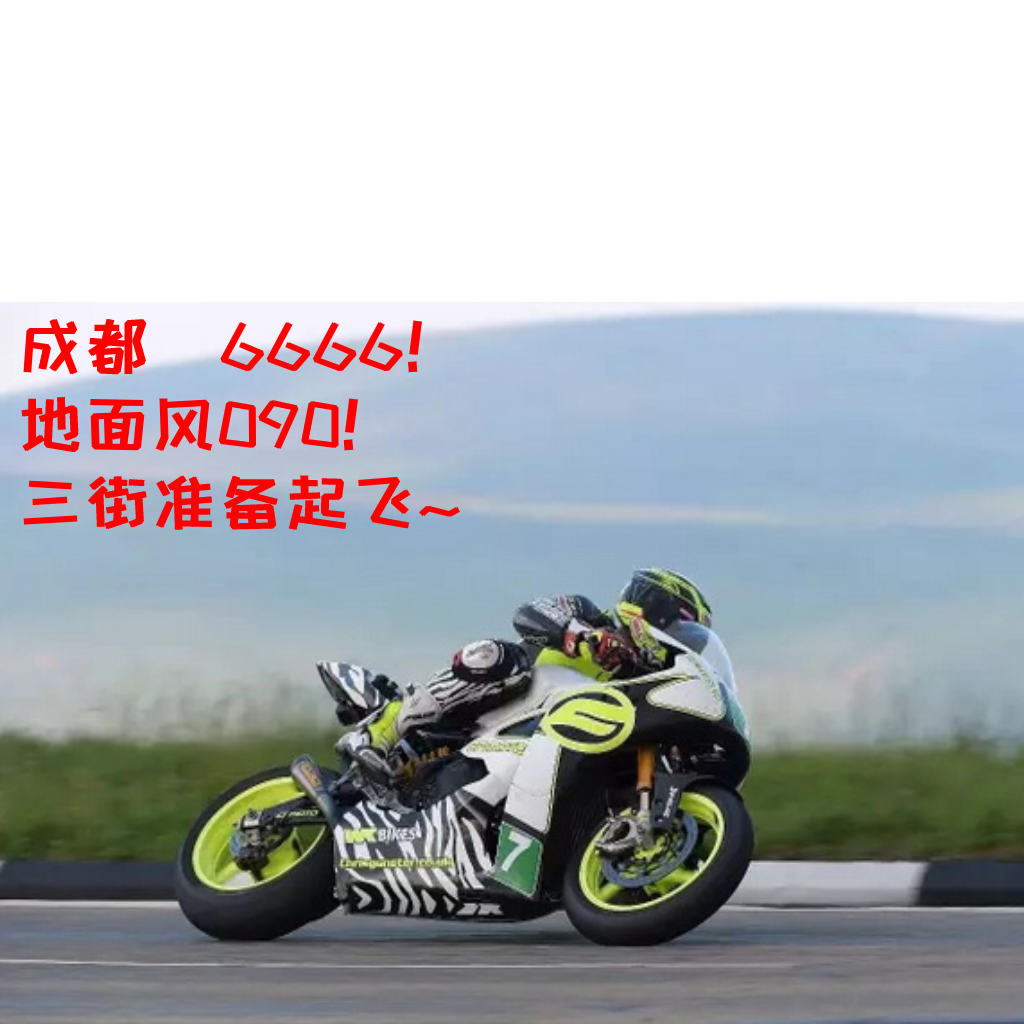
<style>
.page{position:relative;width:1024px;height:1024px;background:#ffffff}
.page>*{position:absolute;margin:0}
.t1{font:65px "HappyZcool-2016";color:#ff0000;font-weight:bold}
</style>
<div class="page">
<p class="t1" style="left:21px;top:318px;width:440px;height:212px">成都 6666！ <br>地面风090！<br>三街准备起飞~</p>
</div>
